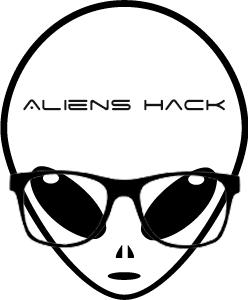
<style>
.page{position:relative;width:248px;height:300px;background:#ffffff}
.page>*{position:absolute;margin:0}
.t1{font:24px "SpaceAge";color:#141415}
</style>
<div class="page">
<p class="t1" style="left:23px;top:99px;width:202px;height:12px">Aliens hack</p>
</div>
